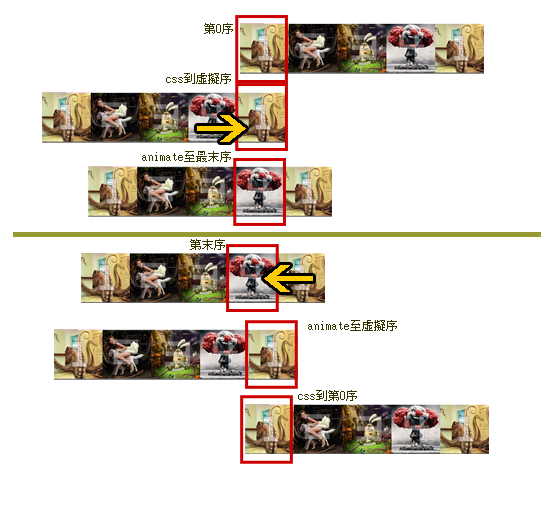
<style>
.page{position:relative;width:541px;height:507px;background:#ffffff}
.page>*{position:absolute;margin:0}
.t1{font:12px "MingLiU";color:#333300}
</style>
<div class="page">
<p class="t1" style="left:204px;top:23px;width:29px;height:11px">第0序</p>
<p class="t1" style="left:166px;top:73px;width:65px;height:11px">css到虛擬序</p>
<p class="t1" style="left:142px;top:151px;width:89px;height:11px">animate至最末序</p>
<p class="t1" style="left:190px;top:239px;width:35px;height:11px">第末序</p>
<p class="t1" style="left:308px;top:320px;width:89px;height:11px">animate至虛擬序</p>
<p class="t1" style="left:298px;top:390px;width:59px;height:11px">css到第0序</p>
</div>
